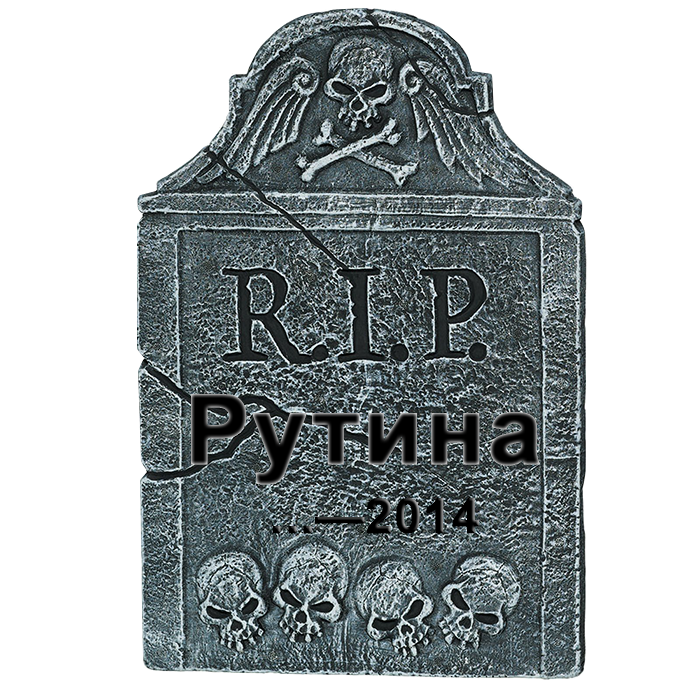
<style>
.page{position:relative;width:700px;height:700px;background:#ffffff}
.page>*{position:absolute;margin:0}
.t1{font:96px "Arial-BoldMT";letter-spacing:0.015em;color:#000000;font-weight:bold}
.t2{font:48px "Arial-BoldMT";letter-spacing:0.015em;color:#000000;font-weight:bold}
</style>
<div class="page">
<p class="t1" style="left:191px;top:394px;width:349px;height:91px">Рутина</p>
<p class="t2" style="left:272px;top:498px;width:207px;height:36px">...—2014</p>
</div>
